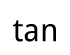
<style>
.page{position:relative;width:70px;height:55px;background:#ffffff}
.page>*{position:absolute;margin:0}
.t1{font:31.8px "DroidSans";color:#000000}
</style>
<div class="page">
<p class="t1" style="left:13px;top:20px;width:43px;height:22px">tan</p>
</div>
